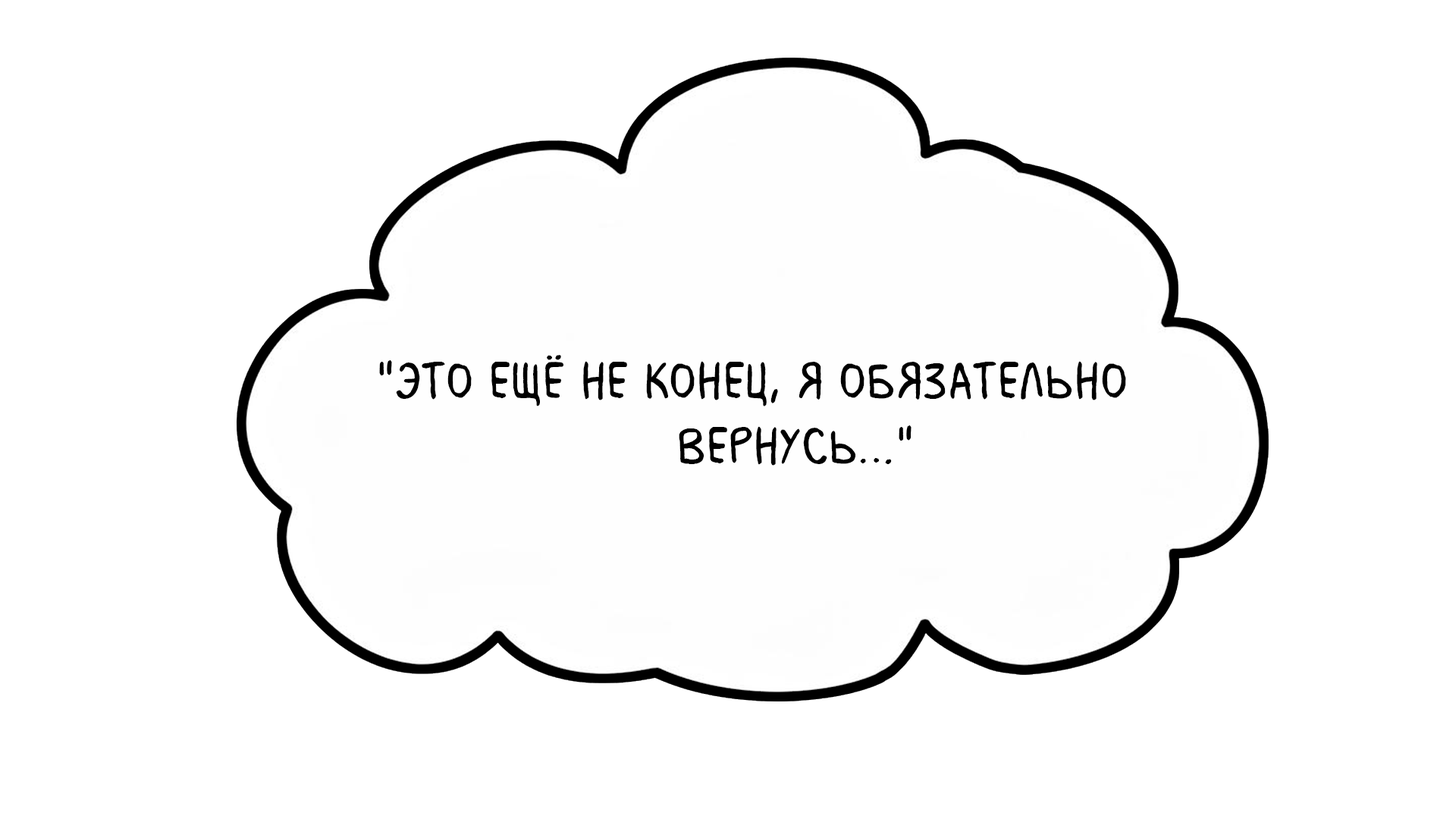
<style>
.page{position:relative;width:1456px;height:819px;background:#ffffff}
.page>*{position:absolute;margin:0}
.t1{font:54.6px "MilkMustacheBB";color:#000000}
</style>
<div class="page">
<p class="t1" style="left:379px;top:355px;width:747px;height:111px">"Это ещё не конец, я обязательно <br>           вернусь…"</p>
</div>
